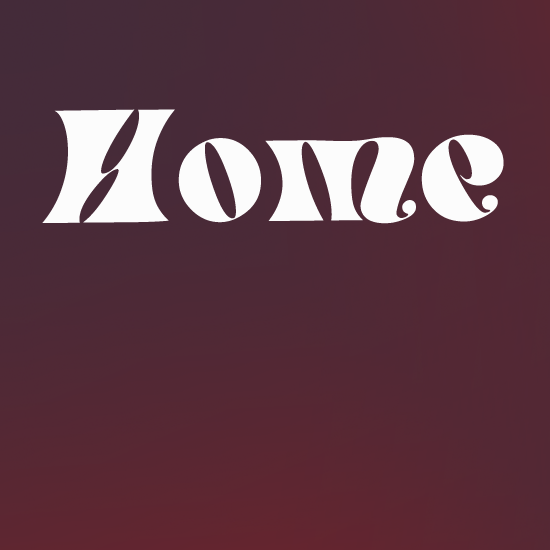
<style>
.page{position:relative;width:550px;height:550px}
.page>*{position:absolute;margin:0}
.t1{font:166.7px "Pirate";color:#fcfcfc}
</style>
<div class="page">
<p class="t1" style="left:42px;top:109px;width:462px;height:115px;rotate:-1deg">Home</p>
</div>
